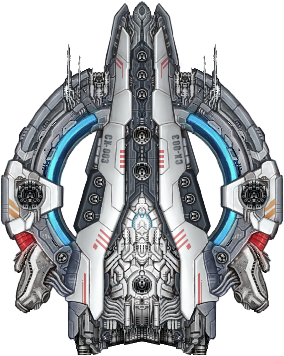
<style>
.page{position:relative;width:284px;height:356px;background:#ffffff}
.page>*{position:absolute;margin:0}
.t1{font:9.4px "Impact";letter-spacing:0.05em;color:#5c6269}
.t2{font:9.2px "Impact";letter-spacing:0.05em;color:#5e646a}
</style>
<div class="page">
<p class="t1" style="left:101px;top:134px;width:12px;height:30px;rotate:98deg">CX-003</p>
<p class="t2" style="left:171px;top:134px;width:12px;height:31px;rotate:-98deg">CX-003</p>
</div>
